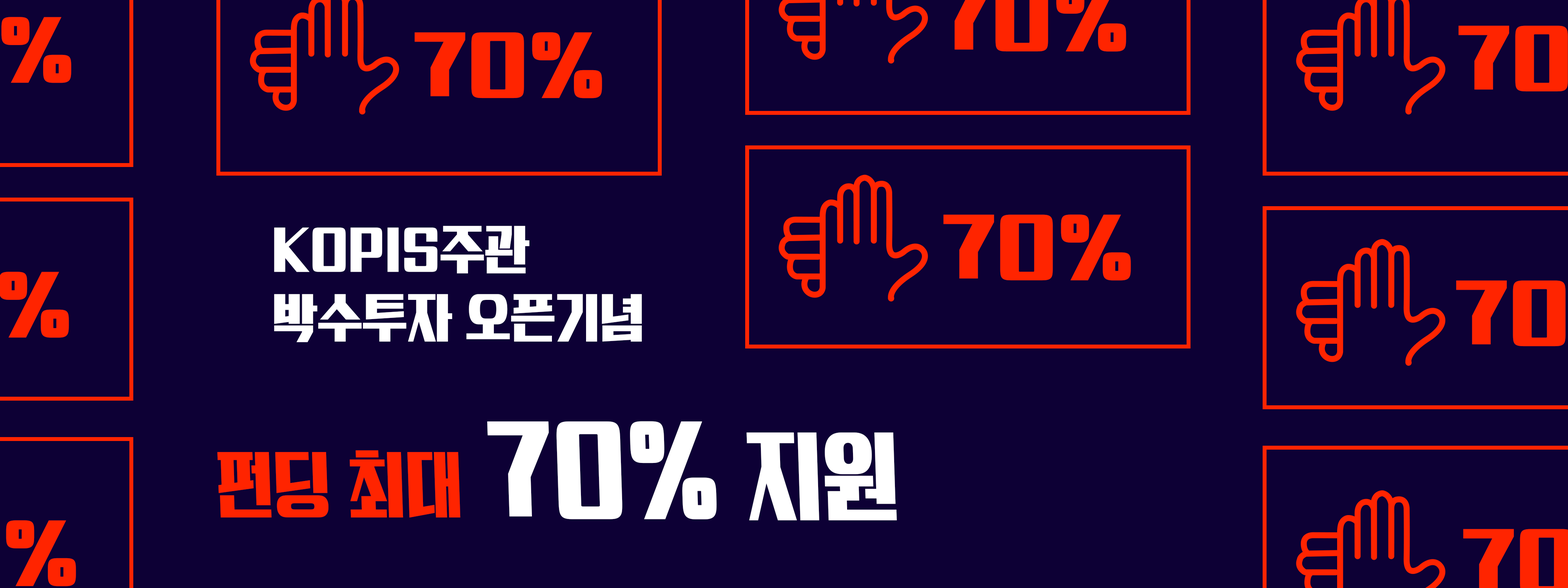
<style>
.page{position:relative;width:1568px;height:588px;background:#0d0035}
.page>*{position:absolute;margin:0}
.t1{font:87.7px "TTSometimeB";color:#ff2400;scale:0.94 1}
.t2{font:59.2px "TTSometimeB";color:#ffffff;scale:0.82 1}
.t3{font:81.7px "TTSometimeB";color:#ff2400;scale:0.76 1}
.t4{font:130.7px "TTSometimeB";color:#ffffff;scale:0.76 1}
.t5{font:109.6px "TTSometimeB";color:#ffffff;scale:0.76 1}
</style>
<div class="page">
<p class="t1" style="left:414px;top:32px;width:188px;height:66px">70%</p>
<p class="t1" style="left:943px;top:214px;width:188px;height:67px">70%</p>
<p class="t2" style="left:274px;top:226px;width:256px;height:48px">KOPIS주관</p>
<p class="t2" style="left:274px;top:294px;width:368px;height:48px">박수투자 오픈기념</p>
<p class="t3" style="left:217px;top:421px;width:680px;height:100px">펀딩 최대 <span class="t4">70% </span><span class="t5">지원</span></p>
</div>
